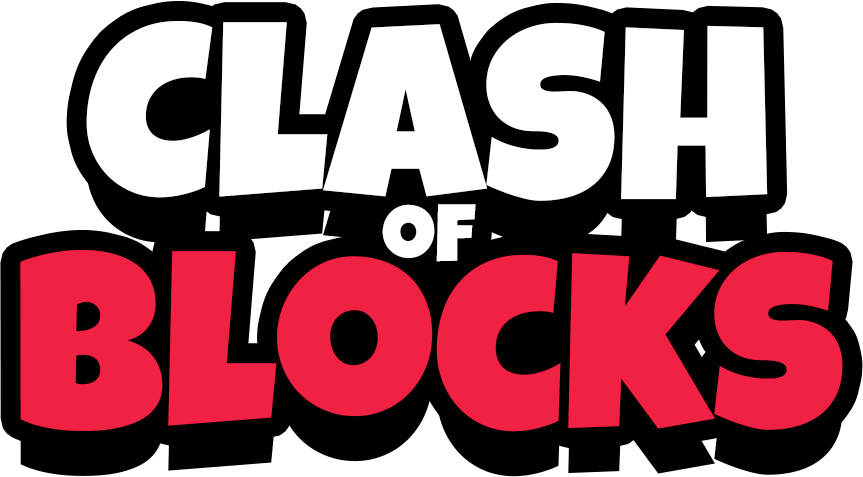
<style>
.page{position:relative;width:863px;height:477px;background:#ffffff}
.page>*{position:absolute;margin:0}
.t1{font:250px/166.7px "LuckiestGuy-Regular";color:#f02143}
.t2{font:250px/166.7px "LuckiestGuy-Regular";color:#ffffff}
.t3{font:83.3px/62.5px "LuckiestGuy-Regular";color:#ffffff}
</style>
<div class="page">
<p class="t1" style="left:20px;top:21px;width:823px;height:411px;text-align:center"><span class="t2">Clash<br></span><span class="t3">of<br></span>Blocks</p>
</div>
